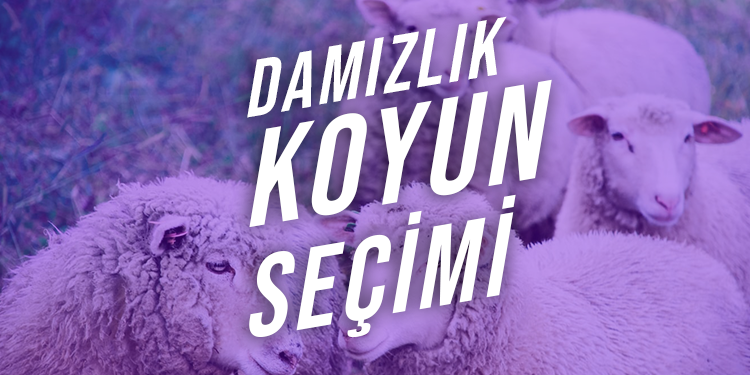
<style>
.page{position:relative;width:750px;height:375px}
.page>*{position:absolute;margin:0}
.t1{font:80.2px/27.7px "BebasNeue-Regular";letter-spacing:0.05em;color:#ffffff;font-style:italic}
.t2{font:136.3px/27.7px "BebasNeue-Regular";letter-spacing:0.05em;color:#ffffff;font-style:italic}
.t3{font:114.7px/27.7px "BebasNeue-Regular";letter-spacing:0.05em;color:#ffffff;font-style:italic}
</style>
<div class="page">
<p class="t1" style="left:247px;top:16px;width:305px;height:322px;text-align:right;rotate:-10deg">DAMIZLIK<br><br><br><br><span class="t2">KOYUN<br><br><br></span><span class="t3"><br>SEÇİMİ</span></p>
</div>
